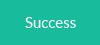
<style>
.page{position:relative;width:100px;height:45px;background:#18bc9c}
.page>*{position:absolute;margin:0}
.t1{font:15px "Lato-Regular";color:#feffff}
</style>
<div class="page">
<p class="t1" style="left:25px;top:17px;width:51px;height:11px">Success</p>
</div>
